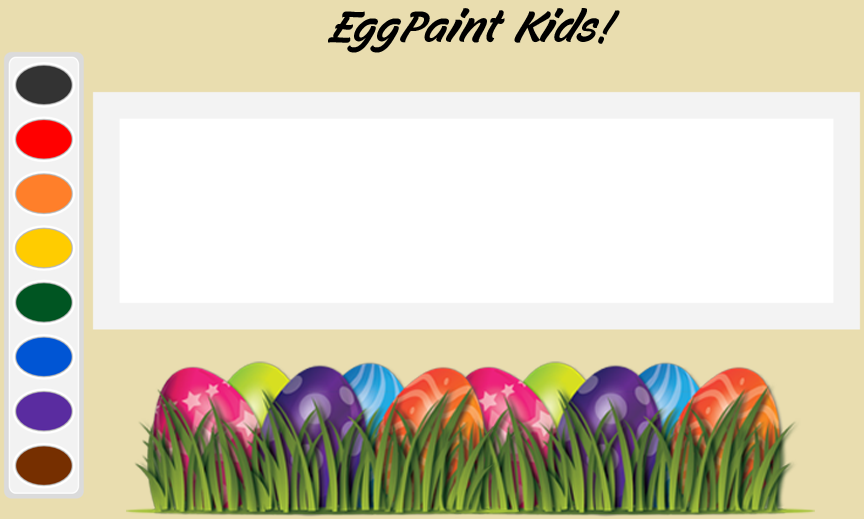
<style>
.page{position:relative;width:864px;height:519px;background:#ffffff}
.page>*{position:absolute;margin:0}
.t1{font:53.2px "FilbertColorPersonalUse";color:#000000}
</style>
<div class="page">
<p class="t1" style="left:328px;top:8px;width:292px;height:45px">EggPaint Kids!</p>
</div>
